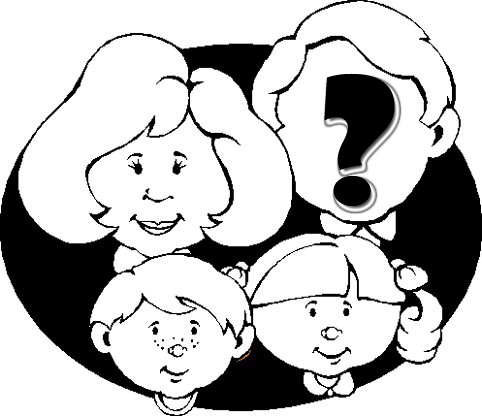
<style>
.page{position:relative;width:482px;height:416px;background:#ffffff}
.page>*{position:absolute;margin:0}
.t1{font:166.7px "ShowcardGothic-Reg";color:#000000}
</style>
<div class="page">
<p class="t1" style="left:324px;top:73px;width:71px;height:133px">?</p>
</div>
